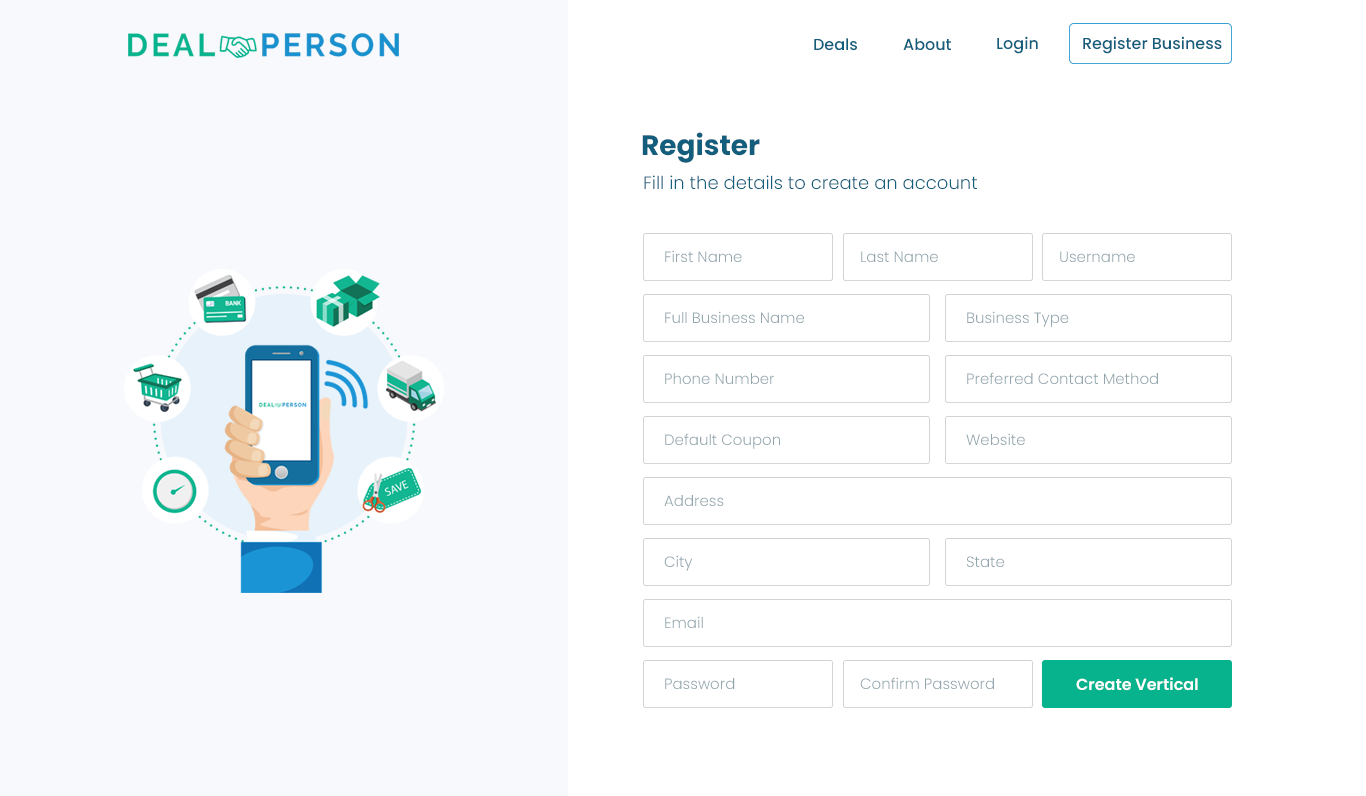
<style>
.page{position:relative;width:1366px;height:796px;background:#ffffff}
.page>*{position:absolute;margin:0}
.t1{font:16px "Poppins-Medium";color:#135e7c}
.t2{font:28px "Poppins-Bold";color:#135e7c}
.t3{font:18px "Poppins-Light";color:#135e7c}
.t4{font:15px "Poppins-Light";color:#93a6ae}
.t5{font:16px "Poppins-SemiBold";color:#ffffff}
</style>
<div class="page">
<p class="t1" style="left:814px;top:38px;width:43px;height:13px">Deals</p>
<p class="t1" style="left:903px;top:38px;width:48px;height:13px">About</p>
<p class="t1" style="left:997px;top:36px;width:41px;height:18px">Login</p>
<p class="t1" style="left:1083px;top:36px;width:139px;height:18px">Register Business</p>
<p class="t2" style="left:642px;top:132px;width:118px;height:31px">Register</p>
<p class="t3" style="left:644px;top:175px;width:333px;height:15px">Fill in the details to create an account</p>
<p class="t4" style="left:665px;top:250px;width:77px;height:12px">First Name</p>
<p class="t4" style="left:861px;top:251px;width:77px;height:11px">Last Name</p>
<p class="t4" style="left:1060px;top:251px;width:75px;height:11px">Username</p>
<p class="t4" style="left:665px;top:311px;width:139px;height:13px">Full Business Name</p>
<p class="t4" style="left:967px;top:311px;width:102px;height:16px">Business Type</p>
<p class="t4" style="left:665px;top:373px;width:109px;height:12px">Phone Number</p>
<p class="t4" style="left:967px;top:372px;width:191px;height:12px">Preferred Contact Method</p>
<p class="t4" style="left:665px;top:433px;width:115px;height:16px">Default Coupon</p>
<p class="t4" style="left:966px;top:433px;width:59px;height:12px">Website</p>
<p class="t4" style="left:664px;top:495px;width:60px;height:11px">Address</p>
<p class="t4" style="left:664px;top:555px;width:29px;height:16px">City</p>
<p class="t4" style="left:966px;top:556px;width:38px;height:11px">State</p>
<p class="t4" style="left:665px;top:616px;width:38px;height:12px">Email</p>
<p class="t4" style="left:665px;top:678px;width:70px;height:11px">Password</p>
<p class="t4" style="left:860px;top:677px;width:134px;height:12px">Confirm Password</p>
<p class="t5" style="left:1076px;top:677px;width:122px;height:14px">Create Vertical</p>
</div>
